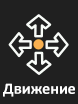
<style>
.page{position:relative;width:78px;height:104px;background:#202020}
.page>*{position:absolute;margin:0}
.t1{font:12px "Calibri-Bold";color:#ffffff}
</style>
<div class="page">
<p class="t1" style="left:3px;top:83px;width:72px;height:14px">Движение</p>
</div>
